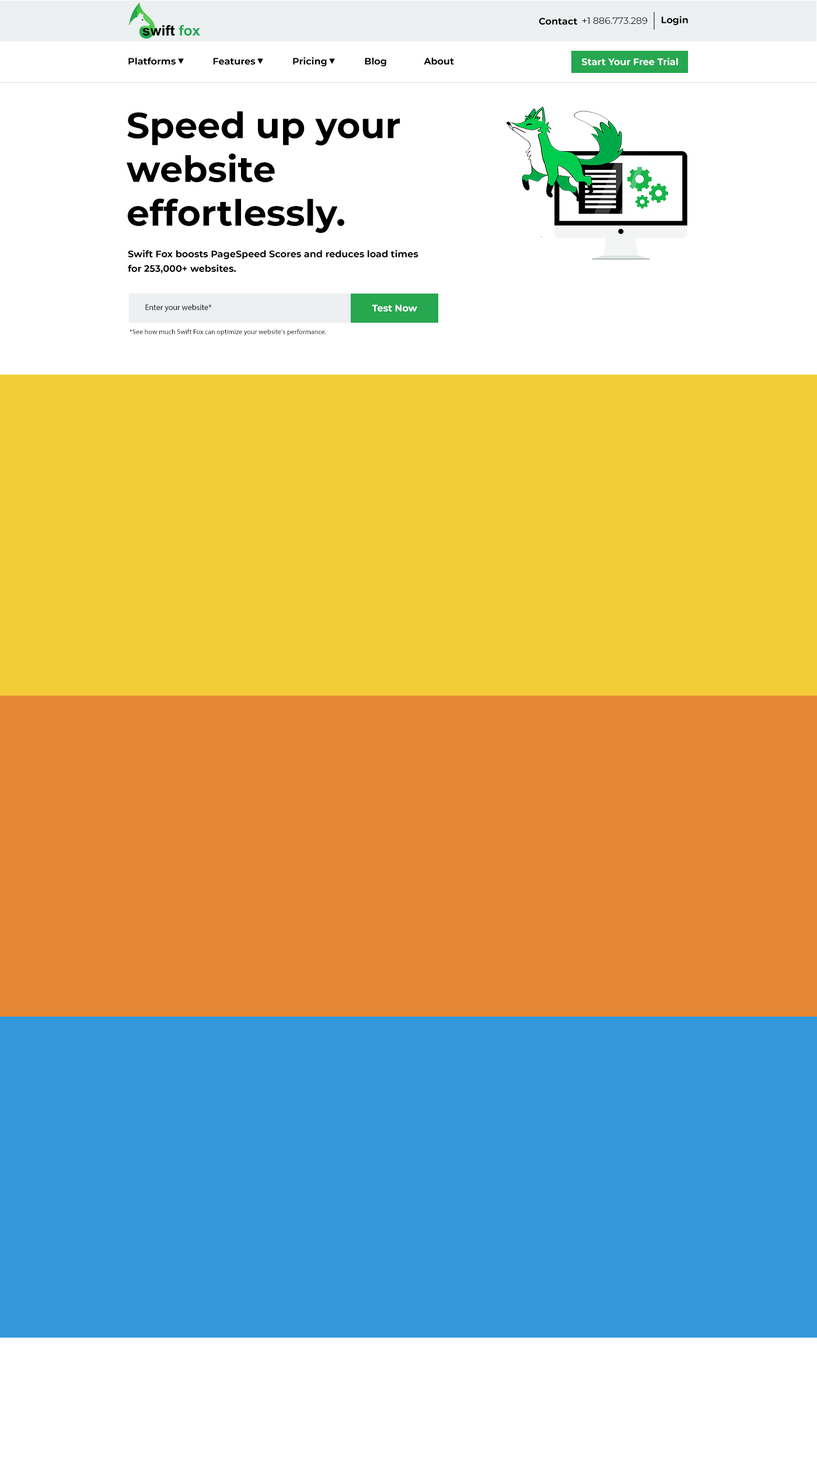
<style>
.page{position:relative;width:817px;height:1459px;background:#ffffff}
.page>*{position:absolute;margin:0}
.t1{font:9.3px "Montserrat-Bold";color:#000000}
.t2{font:9.3px "Montserrat-Regular";color:#000000}
.t3{font:9.3px "Montserrat-Bold";color:#fefefe}
.t4{font:36.2px/43.8px "Montserrat-Bold";color:#000000}
.t5{font:9.3px/14.6px "Montserrat-Bold";color:#000000}
.t6{font:8.2px "MyriadPro-Regular";color:#000000}
.t7{font:7px "MyriadPro-Regular";color:#000000}
</style>
<div class="page">
<p class="t1" style="left:539px;top:18px;width:39px;height:7px">Contact</p>
<p class="t2" style="left:583px;top:17px;width:64px;height:7px">+1 886.773.289</p>
<p class="t1" style="left:661px;top:16px;width:27px;height:9px">Login</p>
<p class="t1" style="left:128px;top:57px;width:326px;height:10px">Platforms              Features              Pricing              Blog              About</p>
<p class="t3" style="left:582px;top:58px;width:96px;height:7px">Start Your Free Trial</p>
<p class="t4" style="left:126px;top:111px;width:274px;height:122px">Speed up your <br>website <br>effortlessly.</p>
<p class="t5" style="left:128px;top:250px;width:291px;height:24px">Swift Fox boosts PageSpeed Scores and reduces load times <br>for 253,000+ websites.</p>
<p class="t6" style="left:145px;top:304px;width:67px;height:8px">Enter your website*</p>
<p class="t3" style="left:372px;top:305px;width:45px;height:7px">Test Now</p>
<p class="t7" style="left:130px;top:329px;width:196px;height:7px">*See how much Swift Fox can optimize your website's performance.</p>
</div>
